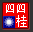
<style>
.page{position:relative;width:33px;height:32px;background:#f20000}
.page>*{position:absolute;margin:0}
.t1{font:10.4px "SimSun";color:#ffffff}
.t2{font:11.7px "SimSun";color:#ffffff}
</style>
<div class="page">
<p class="t1" style="left:6px;top:4px;width:19px;height:9px">四四</p>
<p class="t2" style="left:16px;top:15px;width:11px;height:12px">桂</p>
</div>
